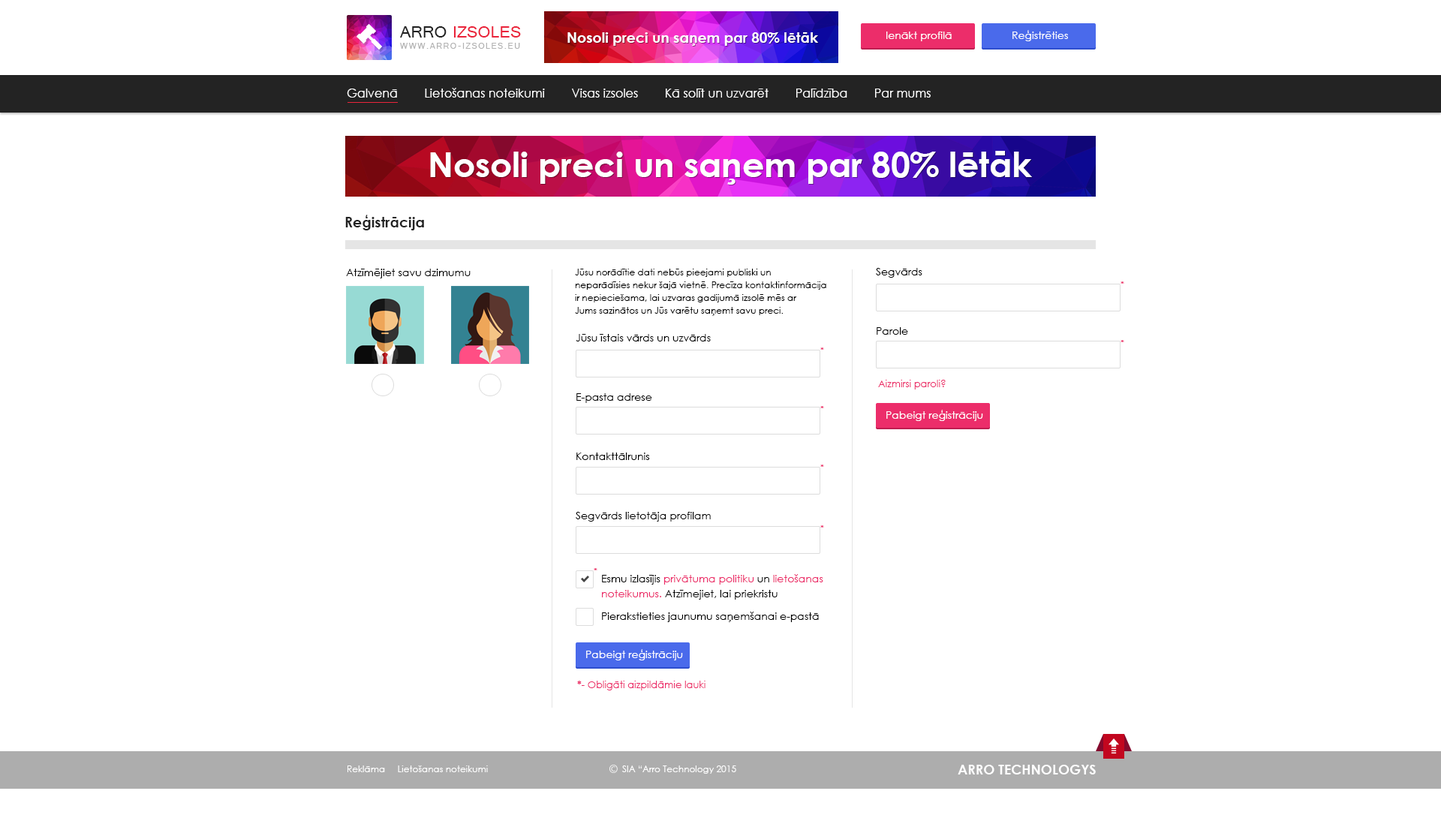
<style>
.page{position:relative;width:1441px;height:827px;background:#ffffff}
.page>*{position:absolute;margin:0}
.t1{font:18px "Raavi";color:#ea243b;text-transform:uppercase}
.t2{font:18px "Raavi";color:#212121;text-transform:uppercase}
.t3{font:14.3px "CenturyGothic-Bold";color:#ffffff}
.t4{font:10.5px "CenturyGothic";color:#ffffff}
.t5{font:9px "Raavi";letter-spacing:0.12em;color:#b2b2b2;text-transform:uppercase}
.t6{font:12px "CenturyGothic";color:#ffffff}
.t7{font:34.2px "CenturyGothic-Bold";color:#ffffff}
.t8{font:14.3px "CenturyGothic-Bold";color:#232323}
.t9{font:10.5px "CenturyGothic";color:#000000}
.t10{font:9px/12.8px "CenturyGothic";color:#000000}
.t11{font:10.5px/59.3px "CenturyGothic";color:#000000}
.t12{font:8.3px "CenturyGothic-Bold";color:#ec2d6a;text-transform:uppercase}
.t13{font:9.8px "CenturyGothic";color:#ec2d6a}
.t14{font:10.5px/15px "CenturyGothic";color:#000000}
.t15{font:10.5px/15px "CenturyGothic";color:#ec2d6a}
.t16{font:9.8px "CenturyGothic-Bold";color:#ec2d6a}
.t17{font:9px "CenturyGothic";color:#ffffff}
.t18{font:13.5px "CenturyGothic-Bold";color:#ffffff;text-transform:uppercase}
</style>
<div class="page">
<p class="t1" style="left:400px;top:26px;width:121px;height:12px"><span class="t2">Arro </span>Izsoles</p>
<p class="t3" style="left:568px;top:32px;width:250px;height:14px">Nosoli preci un saņem par 80% lētāk</p>
<p class="t4" style="left:887px;top:32px;width:65px;height:9px">Ienākt profilā</p>
<p class="t4" style="left:1013px;top:30px;width:55px;height:11px">Reģistrēties</p>
<p class="t5" style="left:400px;top:43px;width:120px;height:6px">www.arro-izsoles.eu</p>
<p class="t6" style="left:347px;top:88px;width:584px;height:10px">Galvenā        Lietošanas noteikumi        Visas izsoles        Kā solīt un uzvarēt        Palīdzība        Par mums</p>
<p class="t7" style="left:430px;top:151px;width:602px;height:34px">Nosoli preci un saņem par 80% lētāk</p>
<p class="t8" style="left:345px;top:215px;width:79px;height:15px">Reģistrācija</p>
<p class="t9" style="left:346px;top:269px;width:125px;height:10px">Atzīmējiet savu dzimumu</p>
<p class="t10" style="left:575px;top:269px;width:252px;height:47px">Jūsu norādītie dati nebūs pieejami publiski un <br>neparādīsies nekur šajā vietnē. Precīza kontaktinformācija<br>ir nepieciešama, lai uzvaras gadijumā izsolē mēs ar <br>Jums sazinātos un Jūs varētu saņemt savu preci.</p>
<p class="t11" style="left:876px;top:268px;width:47px;height:67px">Segvārds<br>Parole</p>
<p class="t12" style="left:1121px;top:282px;width:4px;height:2px">*</p>
<p class="t11" style="left:576px;top:334px;width:135px;height:188px">Jūsu īstais vārds un uzvārds<br>E-pasta adrese<br>Kontakttālrunis<br>Segvārds lietotāja profilam</p>
<p class="t12" style="left:1121px;top:340px;width:4px;height:2px">*</p>
<p class="t12" style="left:821px;top:348px;width:3px;height:2px">*</p>
<p class="t13" style="left:878px;top:380px;width:68px;height:10px">Aizmirsi paroli?</p>
<p class="t12" style="left:821px;top:406px;width:3px;height:2px">*</p>
<p class="t4" style="left:887px;top:410px;width:96px;height:11px">Pabeigt reģistrāciju</p>
<p class="t12" style="left:821px;top:465px;width:3px;height:2px">*</p>
<p class="t12" style="left:821px;top:526px;width:3px;height:2px">*</p>
<p class="t12" style="left:594px;top:568px;width:4px;height:3px">*</p>
<p class="t14" style="left:602px;top:574px;width:222px;height:26px">Esmu izlasījis <span class="t15">privātuma politiku</span> un <span class="t15">lietošanas<br>noteikumus. </span>Atzīmejiet, lai priekristu</p>
<p class="t9" style="left:602px;top:612px;width:217px;height:10px">Pierakstieties jaunumu saņemšanai e-pastā</p>
<p class="t4" style="left:586px;top:649px;width:97px;height:12px">Pabeigt reģistrāciju</p>
<p class="t13" style="left:577px;top:681px;width:129px;height:10px"><span class="t16">*</span>- Obligāti aizpildāmie lauki</p>
<p class="t17" style="left:348px;top:766px;width:140px;height:6px">Reklāma     Lietošanas noteikumi</p>
<p class="t17" style="left:622px;top:766px;width:114px;height:8px">SIA “Arro Technology 2015</p>
<p class="t18" style="left:958px;top:765px;width:138px;height:10px">Arro Technologys</p>
</div>
